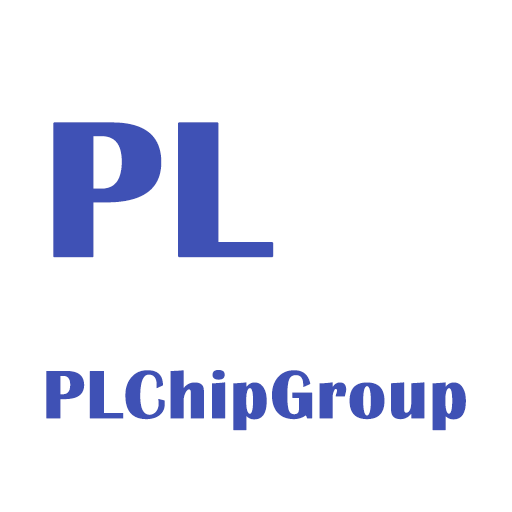
<style>
.page{position:relative;width:512px;height:512px;background:#ffffff}
.page>*{position:absolute;margin:0}
.t1{font:70px/270px "BritannicBold";color:#3f51b5;font-weight:bold}
.t2{font:200px/270px "BritannicBold";color:#3f51b5;text-transform:uppercase;font-weight:bold}
</style>
<div class="page">
<p class="t1" style="left:46px;top:122px;width:420px;height:309px"><span class="t2">PL<br></span>PLChipGroup</p>
</div>
